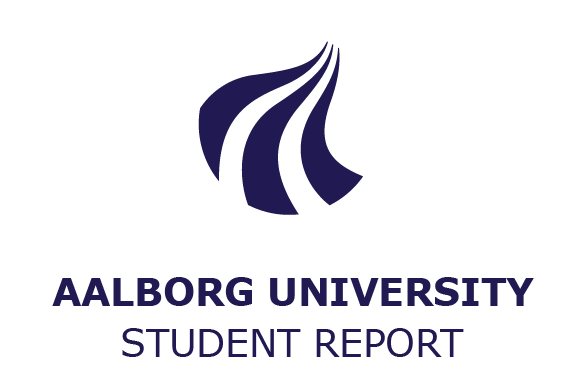
<style>
.page{position:relative;width:586px;height:388px;background:#ffffff}
.page>*{position:absolute;margin:0}
.t1{font:37.5px "Verdana-Bold";color:#211a52}
.t2{font:37.5px "Verdana";color:#211a52}
</style>
<div class="page">
<p class="t1" style="left:52px;top:277px;width:482px;height:29px">AALBORG UNIVERSITY</p>
<p class="t2" style="left:122px;top:328px;width:342px;height:29px">STUDENT REPORT</p>
</div>
